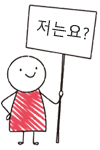
<style>
.page{position:relative;width:100px;height:150px;background:#ffffff}
.page>*{position:absolute;margin:0}
.t1{font:16.2px "MalgunGothic";color:#333333;scale:0.96 1}
</style>
<div class="page">
<p class="t1" style="left:36px;top:20px;width:54px;height:20px;rotate:8deg">저는요?</p>
</div>
